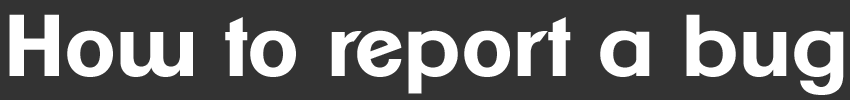
<style>
.page{position:relative;width:850px;height:100px;background:#333333}
.page>*{position:absolute;margin:0}
.t1{font:85px "ClementePDam-Bold";color:#ffffff}
</style>
<div class="page">
<p class="t1" style="left:9px;top:14px;width:835px;height:81px">How to report a bug</p>
</div>
